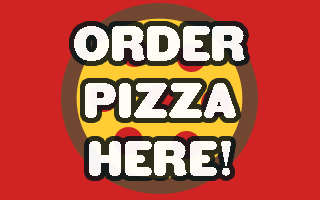
<style>
.page{position:relative;width:320px;height:200px;background:#d02424}
.page>*{position:absolute;margin:0}
.t1{font:47.9px "HWTGothicRound";color:#ffffff;text-transform:uppercase}
</style>
<div class="page">
<p class="t1" style="left:74px;top:26px;width:171px;height:150px;text-align:center;opacity:0.93">Order Pizza Here!</p>
</div>
